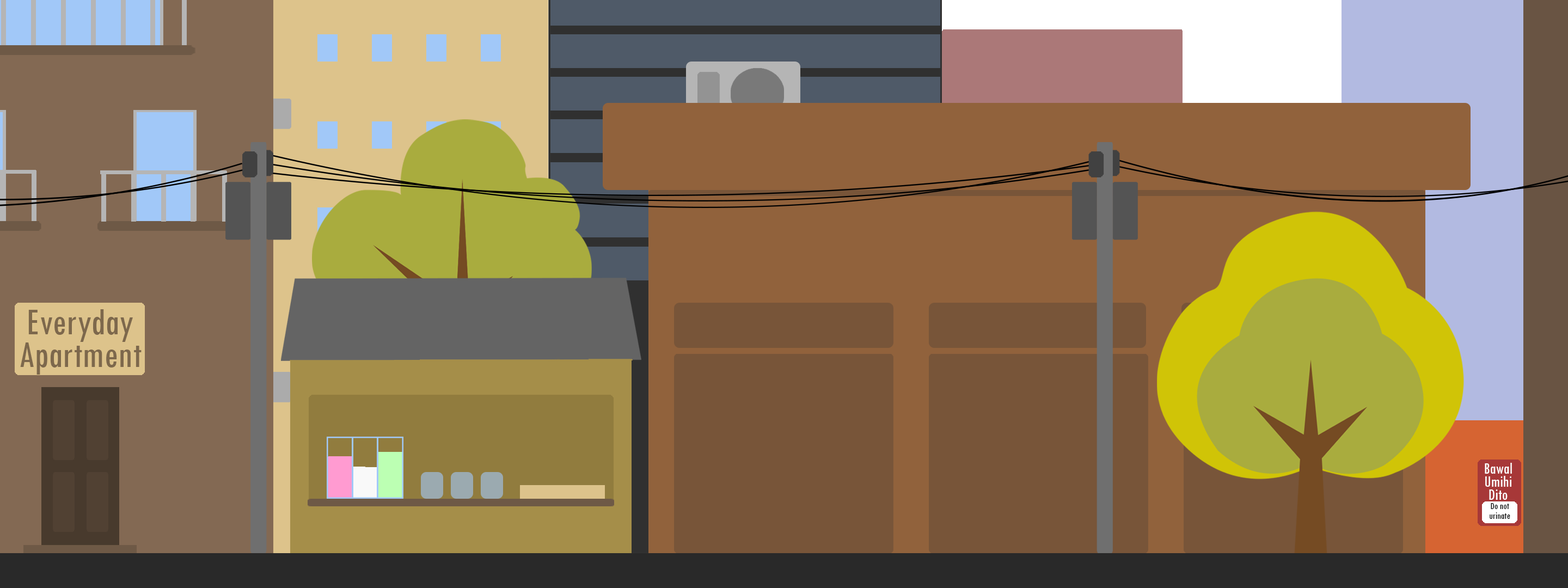
<style>
.page{position:relative;width:1568px;height:588px}
.page>*{position:absolute;margin:0}
.t1{font:39.2px/32.7px "TwCenMT-Condensed";color:#7d684c}
.t2{font:16.3px/13.1px "TwCenMT-Condensed";color:#ffffff}
.t3{font:9.8px "TwCenMT-Condensed";color:#000000}
</style>
<div class="page">
<p class="t1" style="left:20px;top:309px;width:122px;height:66px;text-align:center">Everyday<br>Apartment</p>
<p class="t2" style="left:1485px;top:463px;width:27px;height:37px;text-align:center">Bawal Umihi Dito</p>
<p class="t3" style="left:1490px;top:503px;width:20px;height:16px">Do not urinate</p>
</div>
